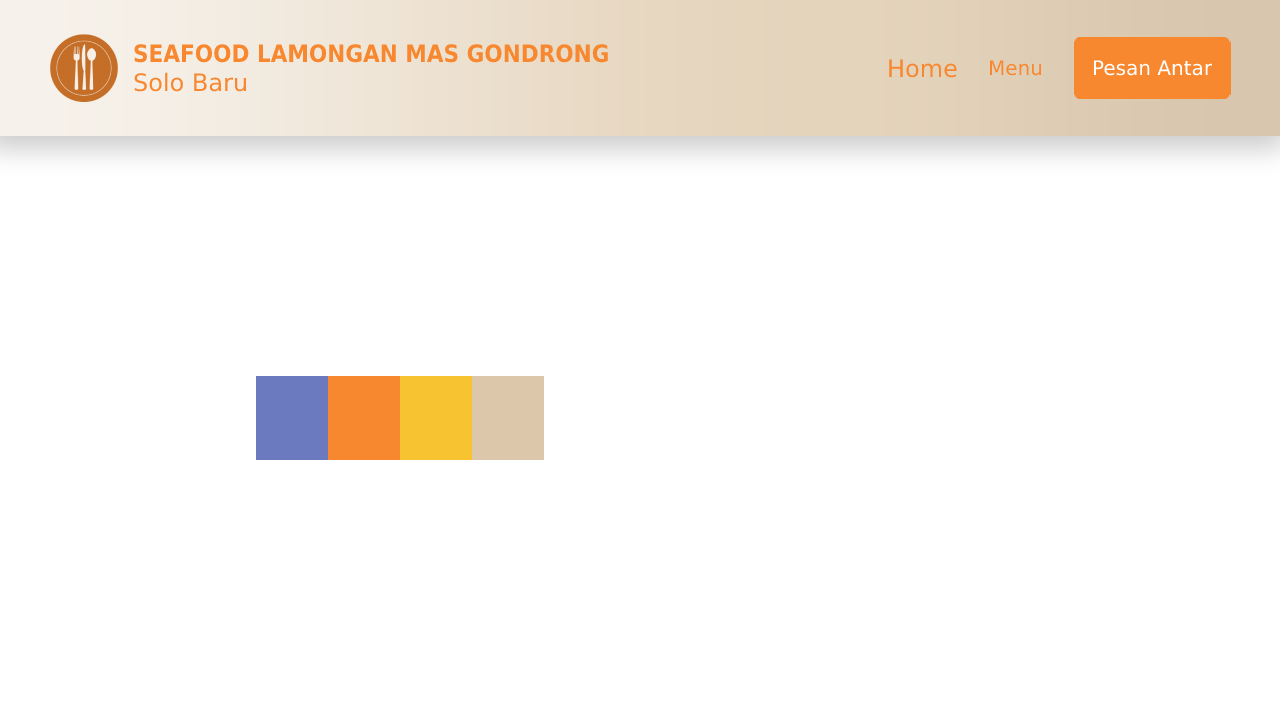
<style>
.page{position:relative;width:1280px;height:720px;background:#ffffff}
.page>*{position:absolute;margin:0}
.t1{font:24px "DejaVuSansCondensed-Bold";color:#f7882f}
.t2{font:24px "DejaVuSans";color:#f7882f}
.t3{font:20px "DejaVuSans";color:#f7882f}
.t4{font:20px "DejaVuSans";color:#ffffff}
</style>
<div class="page">
<p class="t1" style="left:134px;top:44px;width:474px;height:48px">SEAFOOD LAMONGAN MAS GONDRONG<br><span class="t2">Solo Baru</span></p>
<p class="t2" style="left:889px;top:59px;width:68px;height:19px">Home</p>
<p class="t3" style="left:989px;top:60px;width:53px;height:16px">Menu</p>
<p class="t4" style="left:1093px;top:60px;width:120px;height:16px">Pesan Antar</p>
</div>
